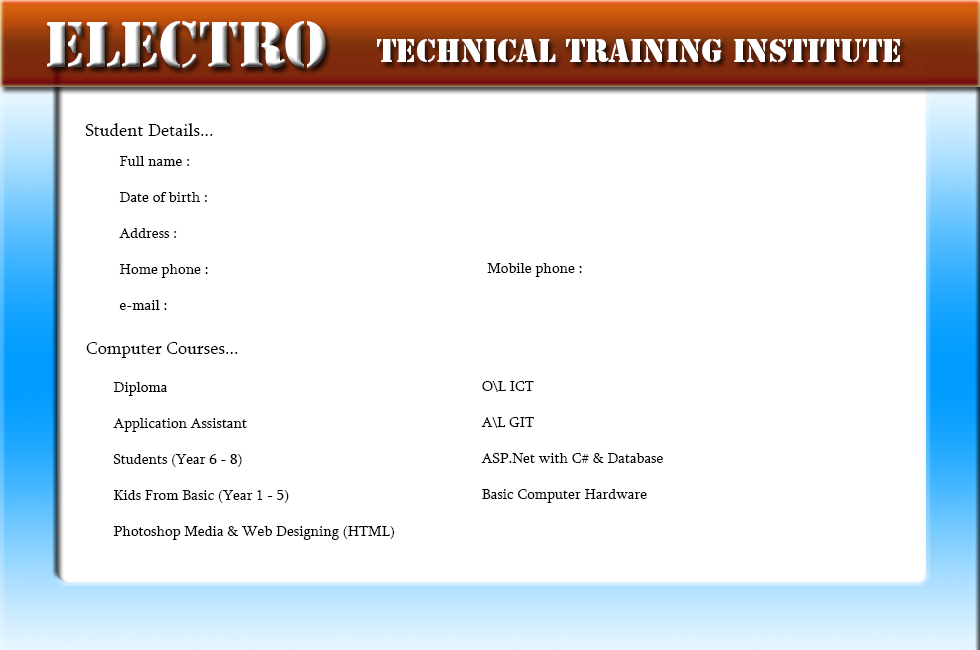
<style>
.page{position:relative;width:980px;height:650px;background:#ffffff}
.page>*{position:absolute;margin:0}
.t1{font:60px "StencilStd";color:#ffffff}
.t2{font:30px "StencilStd";color:#ffffff}
.t3{font:18px "Sylfaen";color:#000000}
.t4{font:15px "Sylfaen";color:#000000}
</style>
<div class="page">
<p class="t1" style="left:47px;top:21px;width:279px;height:47px">Electro</p>
<p class="t2" style="left:377px;top:39px;width:523px;height:23px">Technical Training Institute</p>
<p class="t3" style="left:85px;top:123px;width:128px;height:13px">Student Details...</p>
<p class="t4" style="left:119px;top:156px;width:89px;height:154px">Full name :<br><br>Date of birth :<br><br>Address :<br><br>Home phone :<br><br>e-mail :</p>
<p class="t4" style="left:487px;top:263px;width:95px;height:14px">Mobile phone :</p>
<p class="t3" style="left:86px;top:342px;width:152px;height:16px">Computer Courses...</p>
<p class="t4" style="left:113px;top:382px;width:282px;height:158px">Diploma<br><br>Application Assistant<br><br>Students (Year 6 - 8)<br><br>Kids From Basic (Year 1 - 5)<br><br>Photoshop Media &amp; Web Designing (HTML)</p>
<p class="t4" style="left:481px;top:381px;width:182px;height:122px">O\L ICT<br><br>A\L GIT<br><br>ASP.Net with C# &amp; Database<br><br>Basic Computer Hardware</p>
</div>
